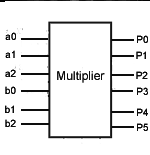
<style>
.page{position:relative;width:150px;height:155px;background:#ffffff}
.page>*{position:absolute;margin:0}
.t1{font:10px "ArialMT"}
.t2{font:12px "ArialMT";color:#0d0d0d}
</style>
<div class="page">
<p class="t1" style="left:5px;top:31px;width:11px;height:8px">a0</p>
<p class="t1" style="left:137px;top:34px;width:11px;height:8px">P0</p>
<p class="t1" style="left:5px;top:49px;width:10px;height:8px">a1</p>
<p class="t1" style="left:136px;top:50px;width:10px;height:8px">P1</p>
<p class="t1" style="left:5px;top:68px;width:11px;height:8px">a2</p>
<p class="t2" style="left:57px;top:70px;width:48px;height:12px">Multiplier</p>
<p class="t1" style="left:5px;top:85px;width:11px;height:8px">b0</p>
<p class="t1" style="left:5px;top:104px;width:9px;height:8px">b1</p>
<p class="t1" style="left:137px;top:107px;width:11px;height:8px">P4</p>
<p class="t1" style="left:5px;top:118px;width:11px;height:8px">b2</p>
</div>
